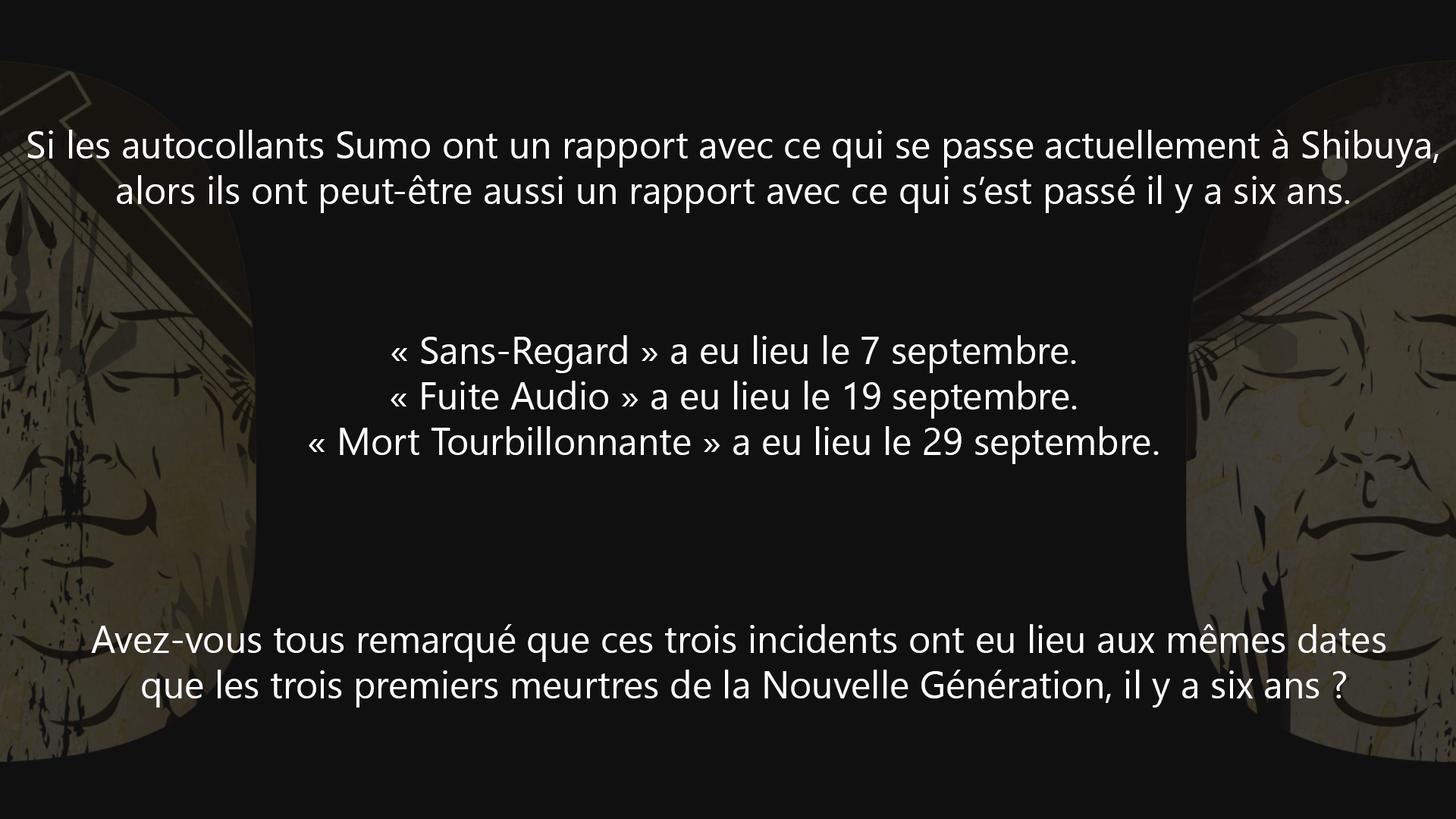
<style>
.page{position:relative;width:1456px;height:819px;background:#101010}
.page>*{position:absolute;margin:0}
.t1{font:37.9px "SegoeUIHistoric";color:#ffffff}
</style>
<div class="page">
<p class="t1" style="left:27px;top:130px;width:1412px;height:83px;text-align:center">Si les autocollants Sumo ont un rapport avec ce qui se passe actuellement à Shibuya,<br>alors ils ont peut-être aussi un rapport avec ce qui s’est passé il y a six ans.</p>
<p class="t1" style="left:309px;top:335px;width:850px;height:129px;text-align:center">« Sans-Regard » a eu lieu le 7 septembre.<br>« Fuite Audio » a eu lieu le 19 septembre.<br>« Mort Tourbillonnante » a eu lieu le 29 septembre.</p>
<p class="t1" style="left:91px;top:624px;width:1295px;height:84px;text-align:center">Avez-vous tous remarqué que ces trois incidents ont eu lieu aux mêmes dates <br>que les trois premiers meurtres de la Nouvelle Génération, il y a six ans ?</p>
</div>
